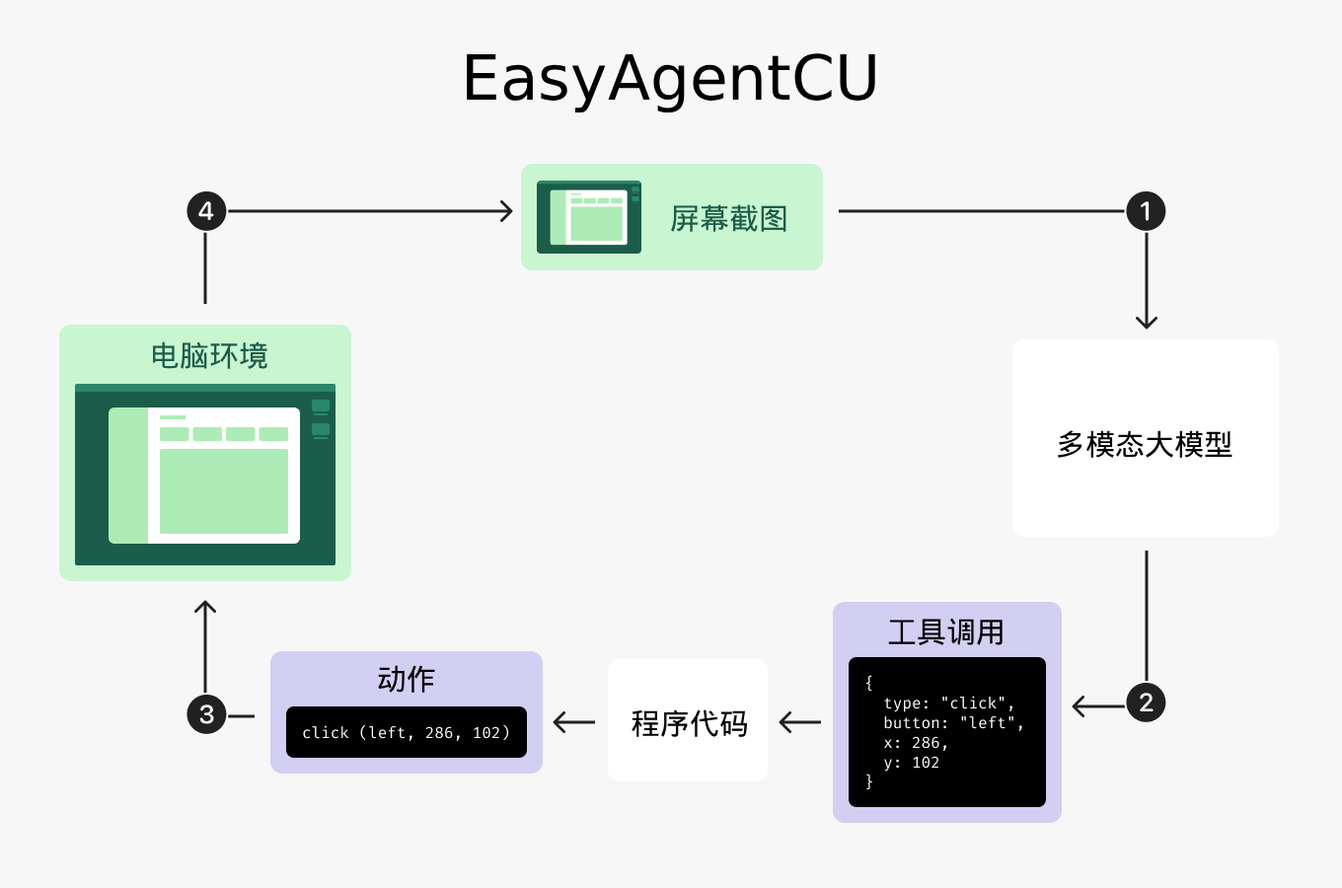
<style>
.page{position:relative;width:1342px;height:888px;background:#f7f7f7}
.page>*{position:absolute;margin:0}
.t1{font:62.2px "DejaVuSans";color:#000000}
.t2{font:29.6px "DroidSansFallback";color:#1b5d4a}
.t3{font:29.6px "DroidSansFallback";color:#000000}
</style>
<div class="page">
<p class="t1" style="left:467px;top:53px;width:408px;height:61px">EasyAgentCU</p>
<p class="t2" style="left:671px;top:204px;width:116px;height:28px">屏幕截图</p>
<p class="t2" style="left:153px;top:342px;width:114px;height:27px">电脑环境</p>
<p class="t3" style="left:1057px;top:430px;width:176px;height:28px">多模态大模型</p>
<p class="t3" style="left:888px;top:618px;width:115px;height:28px">工具调用</p>
<p class="t3" style="left:378px;top:665px;width:57px;height:28px">动作</p>
<p class="t3" style="left:632px;top:710px;width:116px;height:27px">程序代码</p>
</div>
